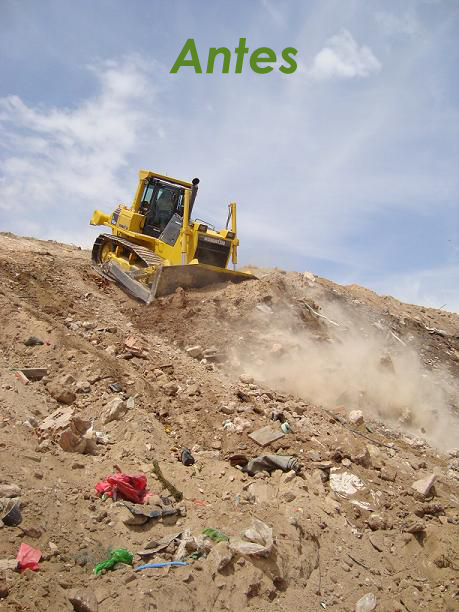
<style>
.page{position:relative;width:459px;height:612px}
.page>*{position:absolute;margin:0}
.t1{font:48px "CenturyGothic-BoldItalic";color:#5a8625}
</style>
<div class="page">
<p class="t1" style="left:169px;top:38px;width:129px;height:36px">Antes</p>
</div>
